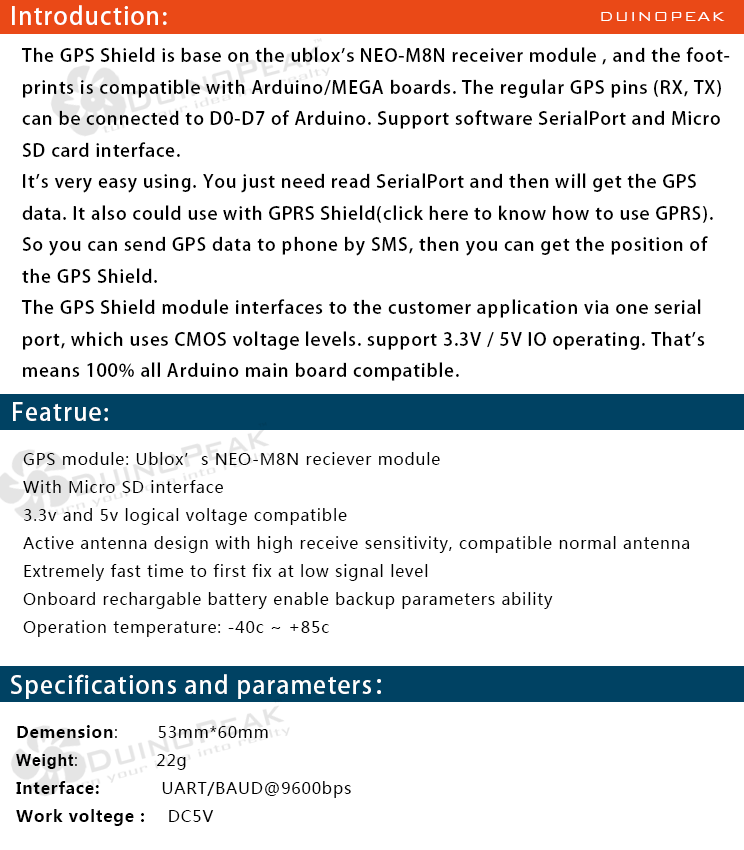
<style>
.page{position:relative;width:744px;height:850px;background:#ffffff}
.page>*{position:absolute;margin:0}
.t1{font:24px "AdobeHeitiStd-Regular";letter-spacing:0.05em;color:#ffffff}
.t2{font:18px "BankGothicBT-Light";letter-spacing:0.05em;color:#ffffff}
.t3{font:18px "AdobeHeitiStd-Regular";letter-spacing:0.05em;color:#000000}
.t4{font:16px "MicrosoftYaHei";letter-spacing:0.05em;color:#000000}
.t5{font:16px "MicrosoftYaHei-Bold";letter-spacing:0.05em;color:#000000}
.t6{font:16px "Arial-BoldMT";letter-spacing:0.05em;color:#000000}
</style>
<div class="page">
<p class="t1" style="left:12px;top:5px;width:155px;height:20px">Introduction:</p>
<p class="t2" style="left:601px;top:12px;width:124px;height:9px">DUINOPEAK</p>
<p class="t3" style="left:21px;top:47px;width:709px;height:334px">The GPS Shield is base on the ublox's NEO-M8N receiver module , and the foot-<br>prints is compatible with Arduino/MEGA boards. The regular GPS pins (RX, TX) <br>can be connected to D0-D7 of Arduino. Support software SerialPort and Micro <br>SD card interface.<br>It's very easy using. You just need read SerialPort and then will get the GPS <br>data. It also could use with GPRS Shield(click here to know how to use GPRS). <br>So you can send GPS data to phone by SMS, then you can get the position of <br>the GPS Shield.<br>The GPS Shield module interfaces to the customer application via one serial <br>port, which uses CMOS voltage levels. support 3.3V / 5V IO operating. That's <br>means 100% all Arduino main board compatible.</p>
<p class="t1" style="left:13px;top:402px;width:95px;height:19px">Featrue:</p>
<p class="t4" style="left:23px;top:452px;width:667px;height:185px">GPS module: Ublox’s NEO-M8N reciever module<br>With Micro SD interface<br>3.3v and 5v logical voltage compatible<br>Active antenna design with high receive sensitivity, compatible normal antenna<br>Extremely fast time to first fix at low signal level<br>Onboard rechargable battery enable backup parameters ability<br>Operation temperature: -40c ~ +85c</p>
<p class="t1" style="left:11px;top:674px;width:370px;height:25px">Specifications and parameters：</p>
<p class="t4" style="left:16px;top:725px;width:335px;height:101px"><span class="t5">Demension</span>:       53mm*60mm<br><span class="t6">Weight</span>:              22g<br><span class="t5">Interface:           </span>UART/BAUD@9600bps<br><span class="t5">Work voltege :</span>    DC5V</p>
</div>
